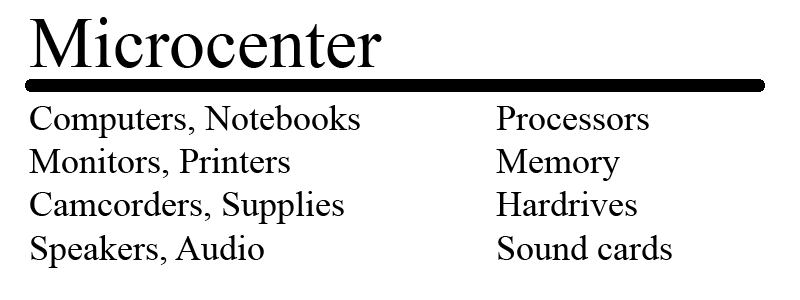
<style>
.page{position:relative;width:800px;height:300px;background:#ffffff}
.page>*{position:absolute;margin:0}
.t1{font:72px "TimesNewRomanPSMT";color:#000000}
.t2{font:36px "TimesNewRomanPSMT";color:#000000}
</style>
<div class="page">
<p class="t1" style="left:30px;top:17px;width:352px;height:51px">Microcenter</p>
<p class="t2" style="left:29px;top:105px;width:331px;height:163px">Computers, Notebooks<br>Monitors, Printers<br>Camcorders, Supplies<br>Speakers, Audio</p>
<p class="t2" style="left:496px;top:106px;width:176px;height:154px">Processors<br>Memory<br>Hardrives<br>Sound cards</p>
</div>
